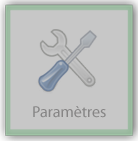
<style>
.page{position:relative;width:138px;height:141px;background:#c7c7c7}
.page>*{position:absolute;margin:0}
.t1{font:15.9px "MyriadPro-Regular";color:#868585}
</style>
<div class="page">
<p class="t1" style="left:33px;top:106px;width:73px;height:12px">Paramètres</p>
</div>
